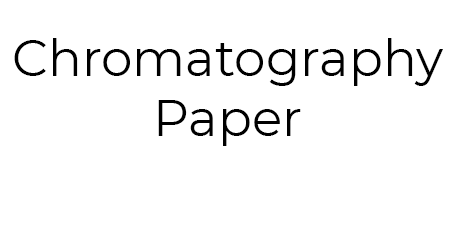
<style>
.page{position:relative;width:455px;height:238px;background:#ffffff}
.page>*{position:absolute;margin:0}
.t1{font:50px "Montserrat-Regular";color:#000000}
</style>
<div class="page">
<p class="t1" style="left:14px;top:38px;width:429px;height:108px;text-align:center">Chromatography Paper</p>
</div>
